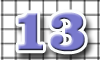
<style>
.page{position:relative;width:100px;height:60px}
.page>*{position:absolute;margin:0}
.t1{font:60px "ClarendonBT-Black";letter-spacing:-0.05em;color:#7979cd;font-weight:bold}
</style>
<div class="page">
<p class="t1" style="left:18px;top:12px;width:67px;height:40px">13</p>
</div>
